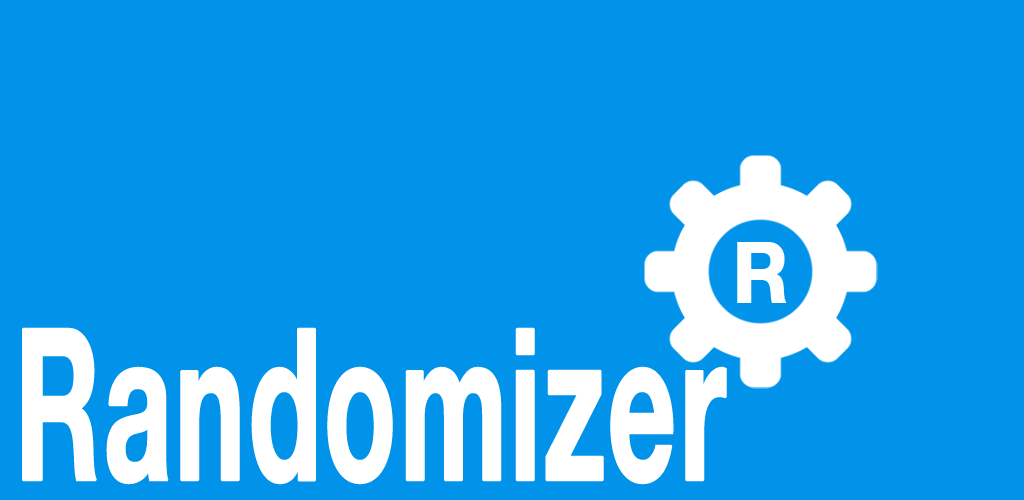
<style>
.page{position:relative;width:1024px;height:500px;background:#0093e9}
.page>*{position:absolute;margin:0}
.t1{font:84.9px "HelveticaNeue-Bold";color:#ffffff;font-weight:bold;scale:0.9 1}
.t2{font:210.8px "HelveticaNeue-Bold";color:#ffffff;font-weight:bold;scale:0.56 1}
</style>
<div class="page">
<p class="t1" style="left:737px;top:242px;width:50px;height:61px">R</p>
<p class="t2" style="left:22px;top:327px;width:705px;height:158px">Randomizer</p>
</div>
